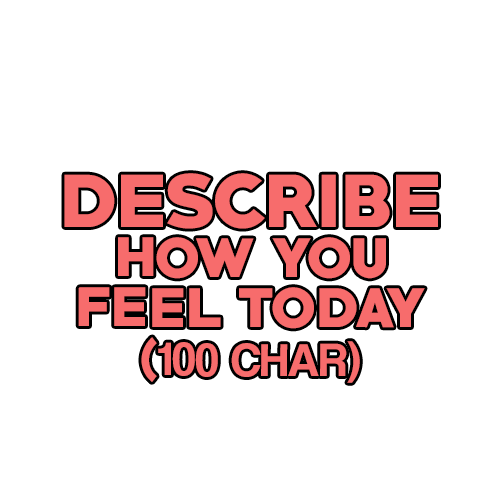
<style>
.page{position:relative;width:500px;height:500px;background:#ffffff}
.page>*{position:absolute;margin:0}
.t1{font:67.3px "PRIMETIME-Regular";color:#f76c6c}
.t2{font:50px "PRIMETIME-Regular";color:#f76c6c}
.t3{font:48px "CoolveticaRg-Regular";color:#f76c6c}
.t4{font:40px "PRIMETIME-Regular";color:#f76c6c}
</style>
<div class="page">
<p class="t1" style="left:64px;top:173px;width:374px;height:56px">DESCRIBE</p>
<p class="t2" style="left:118px;top:237px;width:268px;height:42px">HOW YOU</p>
<p class="t2" style="left:78px;top:287px;width:347px;height:42px">FEEL TODAY</p>
<p class="t3" style="left:141px;top:337px;width:219px;height:46px"><span class="t4">(</span>100 CHAR)</p>
</div>
